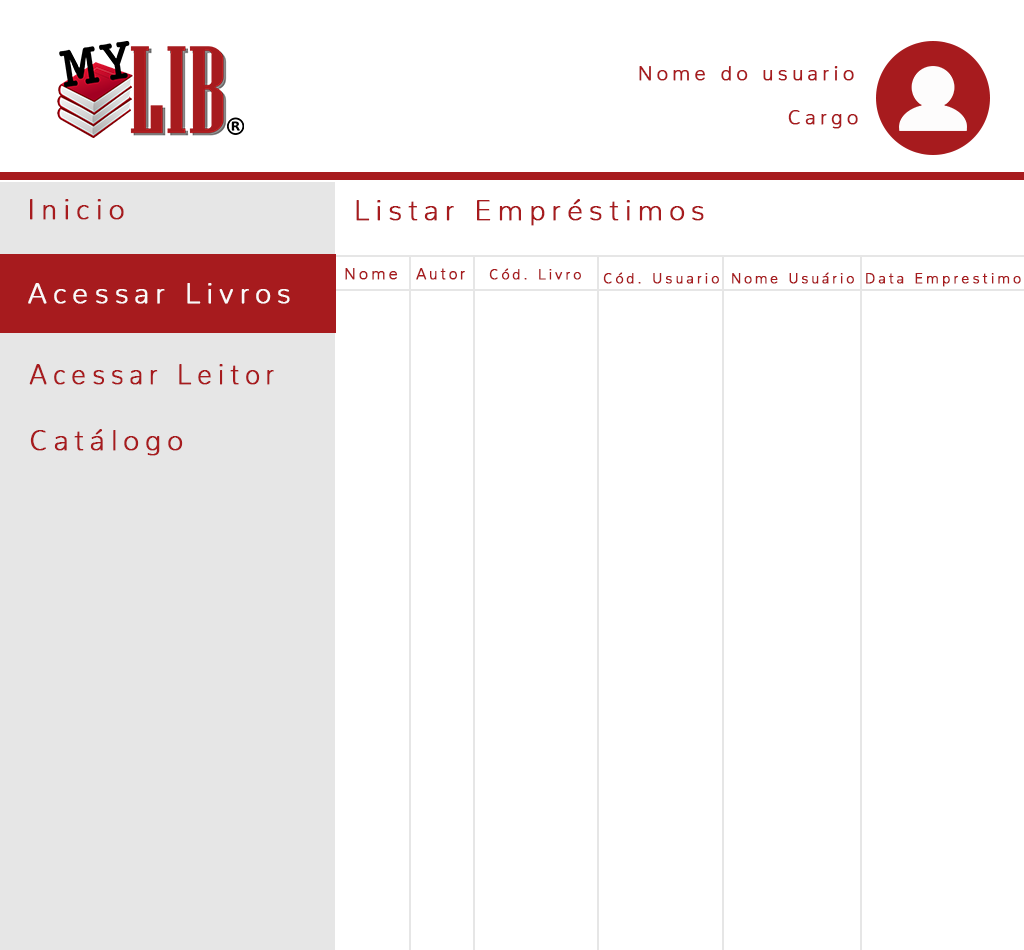
<style>
.page{position:relative;width:1024px;height:950px;background:#ffffff}
.page>*{position:absolute;margin:0}
.t1{font:20px "Nunito-ExtraLight";letter-spacing:0.2em;color:#a71b1e;font-weight:bold}
.t2{font:28px "Nunito-ExtraLight";letter-spacing:0.2em;color:#a71b1e;font-weight:bold}
.t3{font:16px "Nunito-ExtraLight";letter-spacing:0.2em;color:#a71b1e;font-weight:bold}
.t4{font:15.1px "Nunito-ExtraLight";letter-spacing:0.2em;color:#a71b1e;font-weight:bold;scale:0.96 1}
.t5{font:14.2px "Nunito-ExtraLight";letter-spacing:0.2em;color:#a71b1e;font-weight:bold}
.t6{font:28px "Nunito-ExtraLight";letter-spacing:0.2em;color:#fbf9f9;font-weight:bold}
.t7{font:28px "Nunito-ExtraLight";letter-spacing:0.2em;color:#a71b1e;font-weight:bold;scale:0.94 1}
</style>
<div class="page">
<p class="t1" style="left:639px;top:66px;width:215px;height:15px">Nome do usuario</p>
<p class="t1" style="left:788px;top:110px;width:70px;height:19px">Cargo</p>
<p class="t2" style="left:30px;top:199px;width:94px;height:21px">Inicio</p>
<p class="t2" style="left:356px;top:199px;width:348px;height:27px">Listar Empréstimos</p>
<p class="t3" style="left:345px;top:268px;width:53px;height:12px">Nome</p>
<p class="t4" style="left:416px;top:268px;width:49px;height:12px">Autor</p>
<p class="t5" style="left:489px;top:268px;width:92px;height:12px">Cód. Livro</p>
<p class="t5" style="left:603px;top:272px;width:116px;height:12px">Cód. Usuario</p>
<p class="t5" style="left:732px;top:272px;width:122px;height:12px">Nome Usuário</p>
<p class="t5" style="left:866px;top:273px;width:155px;height:14px">Data Emprestimo</p>
<p class="t6" style="left:28px;top:283px;width:262px;height:21px">Acessar Livros</p>
<p class="t7" style="left:29px;top:364px;width:245px;height:21px">Acessar Leitor</p>
<p class="t2" style="left:30px;top:429px;width:153px;height:27px">Catálogo</p>
</div>
